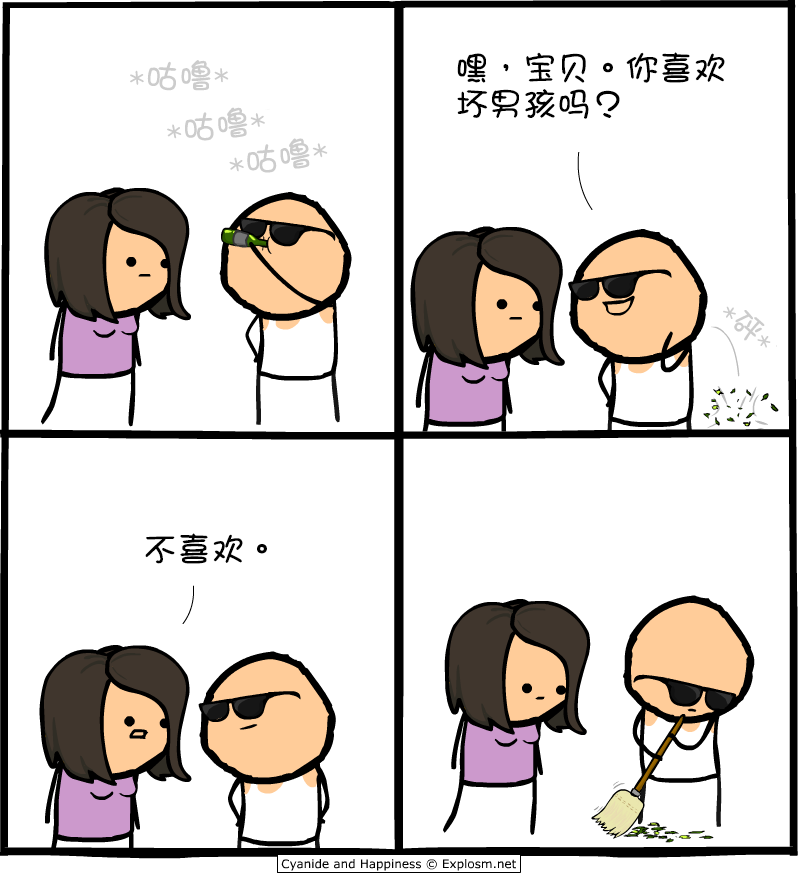
<style>
.page{position:relative;width:800px;height:875px;background:#ffffff}
.page>*{position:absolute;margin:0}
.t1{font:34px/36px "DFGirl";color:#000000}
.t2{font:34px "DFGirl";color:#cccccc}
.t3{font:33.7px "DFGirl";color:#cccccc}
.t4{font:30px "DFGirl";color:#cccccc}
.t5{font:34px "DFGirl";color:#000000}
</style>
<div class="page">
<p class="t1" style="left:457px;top:52px;width:268px;height:67px">嘿，宝贝。你喜欢<br>坏男孩吗？</p>
<p class="t2" style="left:130px;top:60px;width:99px;height:31px;rotate:-2deg">*咕噜*</p>
<p class="t3" style="left:167px;top:107px;width:98px;height:34px;rotate:-8deg">*咕噜*</p>
<p class="t2" style="left:229px;top:138px;width:99px;height:35px;rotate:-10deg">*咕噜*</p>
<p class="t4" style="left:723px;top:306px;width:48px;height:42px;rotate:40deg">*砰*</p>
<p class="t5" style="left:145px;top:533px;width:122px;height:31px">不喜欢。</p>
</div>
